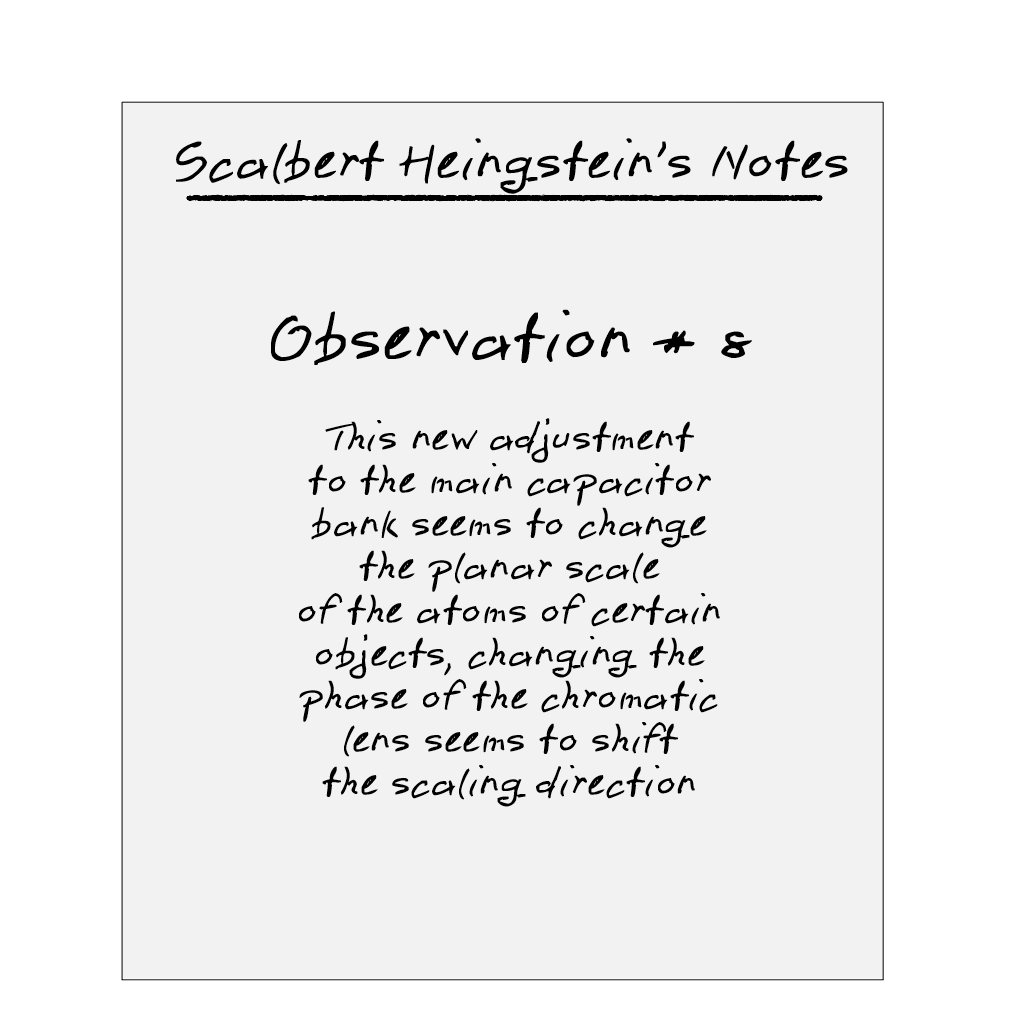
<style>
.page{position:relative;width:1024px;height:1024px;background:#f2f2f2}
.page>*{position:absolute;margin:0}
.t1{font:48px "pen2";color:#000000}
.t2{font:36px "pen2";color:#000000}
.t3{font:60px "pen2";color:#000000}
</style>
<div class="page">
<p class="t1" style="left:176px;top:138px;width:672px;height:56px">Scalbert Heingstein’s Notes</p>
<p class="t2" style="left:271px;top:309px;width:481px;height:498px;text-align:center"><span class="t3">Observation # 8<br></span><br>This new adjustment<br>to the main capacitor<br>bank seems to change<br>the planar scale<br>of the atoms of certain<br>objects, changing the<br>phase of the chromatic<br>lens seems to shift<br>the scaling direction</p>
</div>
